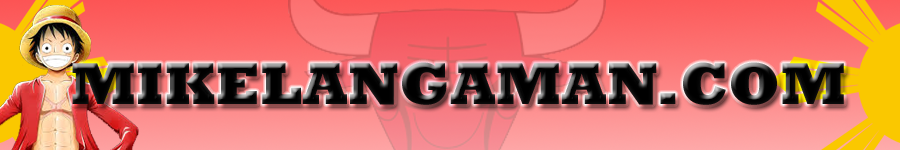
<style>
.page{position:relative;width:900px;height:150px}
.page>*{position:absolute;margin:0}
.t1{font:60px "Rockwell-ExtraBold";color:#000000}
</style>
<div class="page">
<p class="t1" style="left:72px;top:62px;width:772px;height:43px">MIKELANGAMAN.COM</p>
</div>
